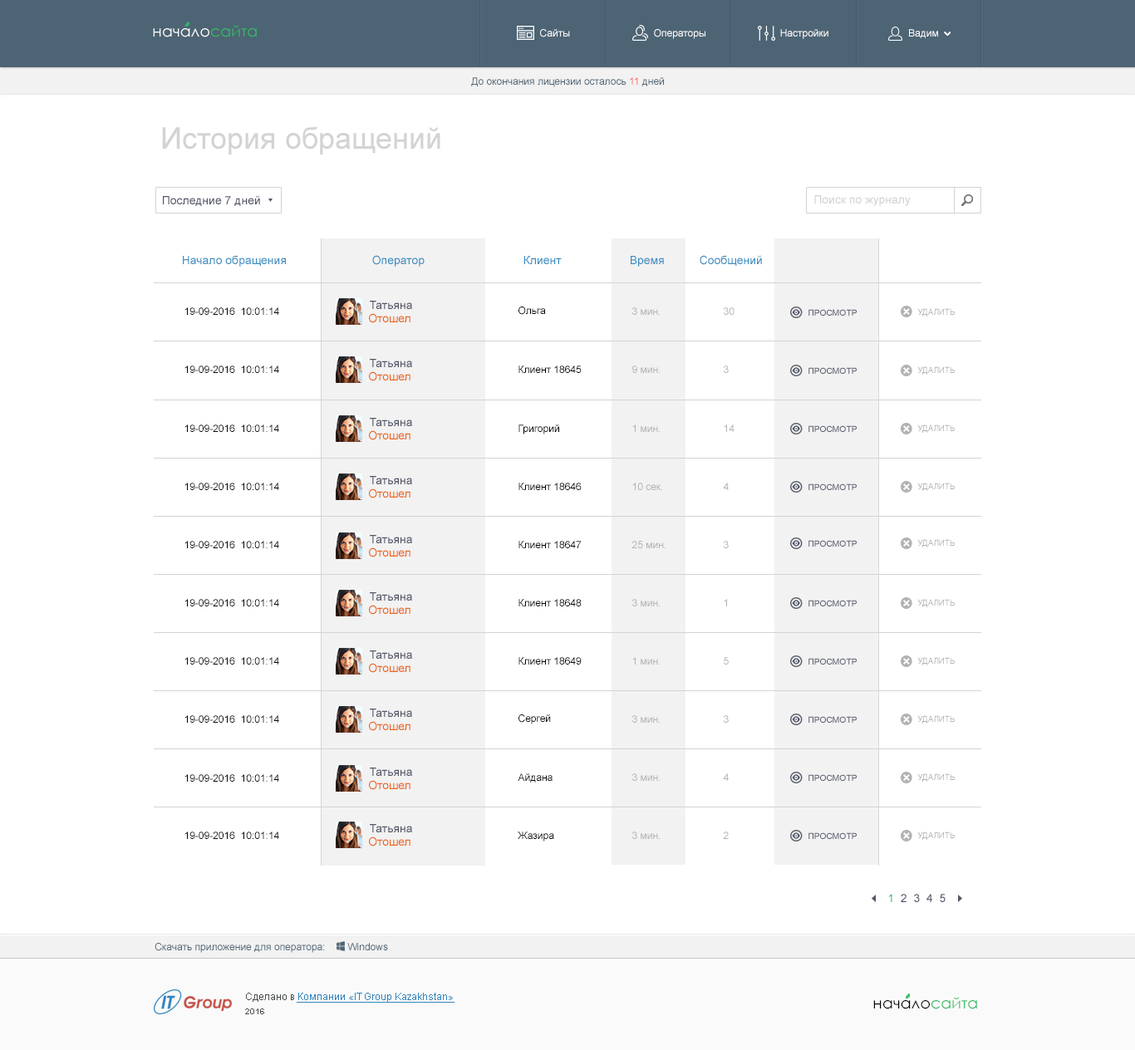
<style>
.page{position:relative;width:1135px;height:1050px;background:#ffffff}
.page>*{position:absolute;margin:0}
.t1{font:15.4px "CenturyGothic";color:#ffffff}
.t2{font:15.4px "CenturyGothic";color:#34ba65}
.t3{font:10px "ArialMT";color:#ffffff}
.t4{font:10px "ArialMT";color:#4d6474}
.t5{font:10px "ArialMT";color:#f96969}
.t6{font:29.9px "ArialMT";color:#d3d3d3}
.t7{font:11.6px "ArialMT";color:#515567}
.t8{font:11.6px "ArialMT";color:#d3d3d3}
.t9{font:11.6px "ArialMT";color:#3d8ec1}
.t10{font:10px "ArialMT";color:#000000}
.t11{font:11.6px "ArialMT";color:#eb6821}
.t12{font:10px "ArialMT";color:#b2b2b2}
.t13{font:8.3px "ArialMT";color:#515567;scale:1.03 1}
.t14{font:8.3px "ArialMT";color:#b2b2b2}
.t15{font:11.6px "ArialMT";color:#34ba65}
.t16{font:10px "ArialMT";color:#3483ba;text-decoration:underline}
.t17{font:10px "ArialMT";color:#4a4d4f}
.t18{font:15.4px "CenturyGothic";color:#000000}
.t19{font:8.3px "Arial-BoldMT";color:#4a4d4f}
</style>
<div class="page">
<p class="t1" style="left:153px;top:25px;width:104px;height:12px">начало<span class="t2">сайта</span></p>
<p class="t3" style="left:540px;top:29px;width:30px;height:8px">Сайты</p>
<p class="t3" style="left:654px;top:29px;width:52px;height:10px">Операторы</p>
<p class="t3" style="left:780px;top:29px;width:49px;height:10px">Настройки</p>
<p class="t3" style="left:909px;top:29px;width:29px;height:9px">Вадим</p>
<p class="t4" style="left:471px;top:77px;width:193px;height:10px">До окончания лицензии осталось <span class="t5">11</span> дней</p>
<p class="t6" style="left:162px;top:126px;width:278px;height:29px">История обращений</p>
<p class="t7" style="left:163px;top:195px;width:97px;height:11px">Последние 7 дней</p>
<p class="t8" style="left:814px;top:195px;width:97px;height:11px">Поиск по журналу</p>
<p class="t9" style="left:183px;top:255px;width:103px;height:12px">Начало обращения</p>
<p class="t9" style="left:372px;top:255px;width:53px;height:12px">Оператор</p>
<p class="t9" style="left:524px;top:256px;width:38px;height:8px">Клиент</p>
<p class="t9" style="left:631px;top:256px;width:33px;height:11px">Время</p>
<p class="t9" style="left:700px;top:255px;width:62px;height:11px">Сообщений</p>
<p class="t7" style="left:370px;top:301px;width:42px;height:8px">Татьяна</p>
<p class="t10" style="left:184px;top:307px;width:95px;height:8px">19-09-2016  10:01:14</p>
<p class="t11" style="left:369px;top:313px;width:42px;height:10px">Отошел</p>
<p class="t10" style="left:519px;top:307px;width:27px;height:8px">Ольга</p>
<p class="t12" style="left:632px;top:307px;width:28px;height:8px">3 мин.</p>
<p class="t12" style="left:724px;top:307px;width:11px;height:8px">30</p>
<p class="t13" style="left:809px;top:309px;width:48px;height:7px">ПРОСМОТР</p>
<p class="t14" style="left:917px;top:308px;width:38px;height:9px">УДАЛИТЬ</p>
<p class="t10" style="left:184px;top:366px;width:95px;height:7px">19-09-2016  10:01:14</p>
<p class="t7" style="left:370px;top:359px;width:42px;height:8px">Татьяна</p>
<p class="t10" style="left:519px;top:366px;width:63px;height:7px">Клиент 18645</p>
<p class="t12" style="left:632px;top:366px;width:28px;height:7px">9 мин.</p>
<p class="t12" style="left:724px;top:366px;width:5px;height:7px">3</p>
<p class="t11" style="left:369px;top:371px;width:42px;height:10px">Отошел</p>
<p class="t13" style="left:809px;top:367px;width:48px;height:7px">ПРОСМОТР</p>
<p class="t14" style="left:917px;top:366px;width:38px;height:9px">УДАЛИТЬ</p>
<p class="t10" style="left:184px;top:425px;width:95px;height:7px">19-09-2016  10:01:14</p>
<p class="t7" style="left:370px;top:418px;width:42px;height:8px">Татьяна</p>
<p class="t10" style="left:519px;top:425px;width:40px;height:10px">Григорий</p>
<p class="t12" style="left:632px;top:425px;width:28px;height:7px">1 мин.</p>
<p class="t12" style="left:724px;top:425px;width:11px;height:7px">14</p>
<p class="t13" style="left:809px;top:425px;width:48px;height:7px">ПРОСМОТР</p>
<p class="t14" style="left:917px;top:425px;width:38px;height:8px">УДАЛИТЬ</p>
<p class="t11" style="left:369px;top:430px;width:42px;height:10px">Отошел</p>
<p class="t10" style="left:184px;top:483px;width:95px;height:7px">19-09-2016  10:01:14</p>
<p class="t7" style="left:370px;top:476px;width:42px;height:8px">Татьяна</p>
<p class="t10" style="left:519px;top:483px;width:63px;height:7px">Клиент 18646</p>
<p class="t12" style="left:632px;top:483px;width:30px;height:7px">10 сек.</p>
<p class="t12" style="left:723px;top:483px;width:6px;height:7px">4</p>
<p class="t13" style="left:809px;top:484px;width:48px;height:6px">ПРОСМОТР</p>
<p class="t14" style="left:917px;top:483px;width:38px;height:8px">УДАЛИТЬ</p>
<p class="t11" style="left:369px;top:489px;width:42px;height:10px">Отошел</p>
<p class="t10" style="left:184px;top:541px;width:95px;height:7px">19-09-2016  10:01:14</p>
<p class="t7" style="left:370px;top:535px;width:42px;height:8px">Татьяна</p>
<p class="t10" style="left:519px;top:541px;width:63px;height:7px">Клиент 18647</p>
<p class="t12" style="left:632px;top:541px;width:34px;height:7px">25 мин.</p>
<p class="t12" style="left:724px;top:541px;width:5px;height:7px">3</p>
<p class="t13" style="left:809px;top:540px;width:48px;height:7px">ПРОСМОТР</p>
<p class="t14" style="left:917px;top:539px;width:38px;height:9px">УДАЛИТЬ</p>
<p class="t11" style="left:369px;top:548px;width:42px;height:10px">Отошел</p>
<p class="t7" style="left:370px;top:593px;width:42px;height:8px">Татьяна</p>
<p class="t10" style="left:184px;top:599px;width:95px;height:8px">19-09-2016  10:01:14</p>
<p class="t11" style="left:369px;top:605px;width:42px;height:10px">Отошел</p>
<p class="t10" style="left:519px;top:599px;width:63px;height:8px">Клиент 18648</p>
<p class="t12" style="left:632px;top:599px;width:28px;height:8px">3 мин.</p>
<p class="t12" style="left:724px;top:599px;width:3px;height:8px">1</p>
<p class="t13" style="left:809px;top:600px;width:48px;height:7px">ПРОСМОТР</p>
<p class="t14" style="left:917px;top:599px;width:38px;height:8px">УДАЛИТЬ</p>
<p class="t7" style="left:370px;top:651px;width:42px;height:8px">Татьяна</p>
<p class="t10" style="left:184px;top:657px;width:95px;height:8px">19-09-2016  10:01:14</p>
<p class="t11" style="left:369px;top:663px;width:42px;height:10px">Отошел</p>
<p class="t10" style="left:519px;top:657px;width:63px;height:8px">Клиент 18649</p>
<p class="t12" style="left:632px;top:657px;width:28px;height:8px">1 мин.</p>
<p class="t12" style="left:724px;top:657px;width:5px;height:8px">5</p>
<p class="t13" style="left:809px;top:658px;width:48px;height:7px">ПРОСМОТР</p>
<p class="t14" style="left:917px;top:657px;width:38px;height:9px">УДАЛИТЬ</p>
<p class="t7" style="left:370px;top:709px;width:42px;height:8px">Татьяна</p>
<p class="t10" style="left:184px;top:716px;width:95px;height:7px">19-09-2016  10:01:14</p>
<p class="t11" style="left:369px;top:721px;width:42px;height:10px">Отошел</p>
<p class="t10" style="left:519px;top:715px;width:32px;height:10px">Сергей</p>
<p class="t12" style="left:632px;top:716px;width:28px;height:7px">3 мин.</p>
<p class="t12" style="left:724px;top:716px;width:5px;height:7px">3</p>
<p class="t13" style="left:809px;top:716px;width:48px;height:7px">ПРОСМОТР</p>
<p class="t14" style="left:917px;top:716px;width:38px;height:8px">УДАЛИТЬ</p>
<p class="t7" style="left:370px;top:768px;width:42px;height:8px">Татьяна</p>
<p class="t10" style="left:518px;top:774px;width:35px;height:9px">Айдана</p>
<p class="t12" style="left:632px;top:774px;width:28px;height:7px">3 мин.</p>
<p class="t12" style="left:723px;top:774px;width:6px;height:7px">4</p>
<p class="t14" style="left:917px;top:774px;width:38px;height:8px">УДАЛИТЬ</p>
<p class="t10" style="left:184px;top:775px;width:95px;height:7px">19-09-2016  10:01:14</p>
<p class="t11" style="left:369px;top:780px;width:42px;height:10px">Отошел</p>
<p class="t13" style="left:809px;top:775px;width:48px;height:6px">ПРОСМОТР</p>
<p class="t10" style="left:184px;top:832px;width:95px;height:7px">19-09-2016  10:01:14</p>
<p class="t7" style="left:370px;top:824px;width:42px;height:9px">Татьяна</p>
<p class="t10" style="left:518px;top:832px;width:36px;height:10px">Жазира</p>
<p class="t12" style="left:632px;top:832px;width:28px;height:7px">3 мин.</p>
<p class="t12" style="left:723px;top:832px;width:6px;height:7px">2</p>
<p class="t13" style="left:809px;top:833px;width:48px;height:6px">ПРОСМОТР</p>
<p class="t14" style="left:917px;top:832px;width:38px;height:8px">УДАЛИТЬ</p>
<p class="t11" style="left:369px;top:837px;width:42px;height:10px">Отошел</p>
<p class="t7" style="left:888px;top:894px;width:58px;height:9px"><span class="t15">1</span>  2  3  4  5</p>
<p class="t4" style="left:155px;top:943px;width:233px;height:10px">Скачать приложение для оператора:        Windows</p>
<p class="t16" style="left:246px;top:993px;width:209px;height:10px"><span class="t17">Сделано в </span>Компании «IT Group Kazakhstan»</p>
<p class="t18" style="left:873px;top:997px;width:104px;height:13px">начало<span class="t2">сайта</span></p>
<p class="t19" style="left:245px;top:1009px;width:19px;height:6px">2016</p>
</div>
